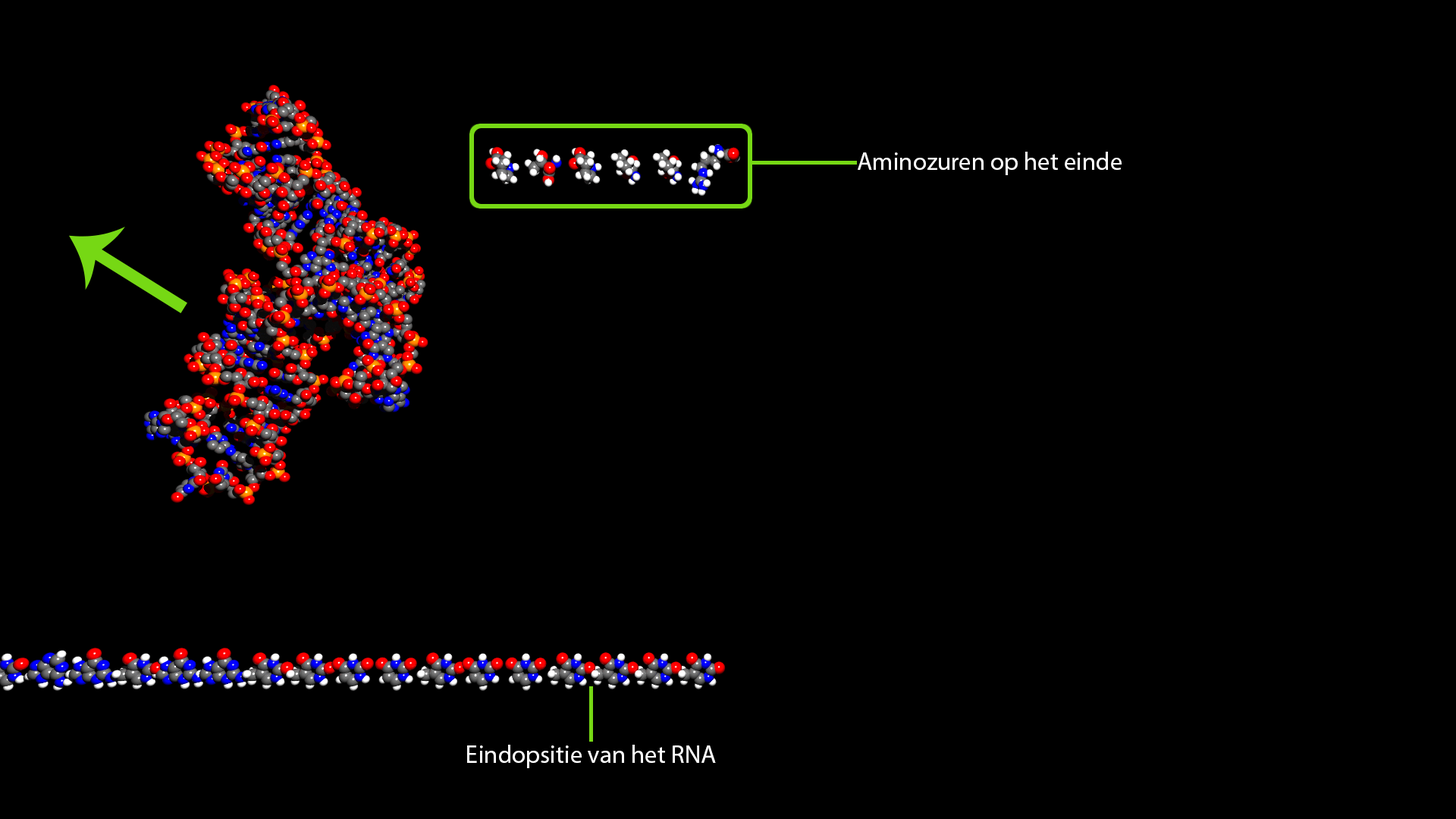
<style>
.page{position:relative;width:1456px;height:819px;background:#000000}
.page>*{position:absolute;margin:0}
.t1{font:25px "MyriadPro-Regular";color:#ffffff}
</style>
<div class="page">
<p class="t1" style="left:858px;top:152px;width:264px;height:23px">Aminozuren op het einde</p>
<p class="t1" style="left:467px;top:745px;width:249px;height:23px">Eindopsitie van het RNA</p>
</div>
